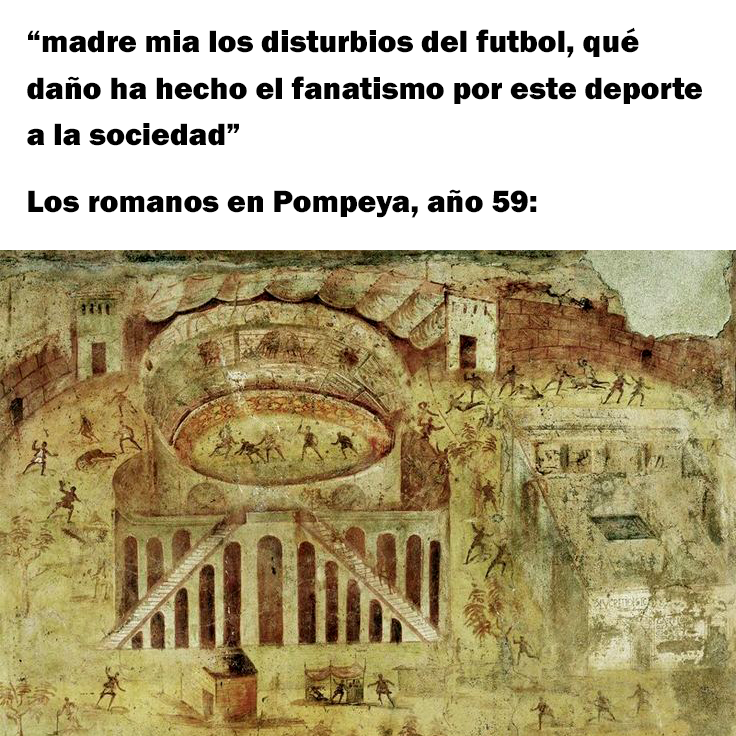
<style>
.page{position:relative;width:736px;height:736px;background:#ffffff}
.page>*{position:absolute;margin:0}
.t1{font:31.9px "FranklinGothic-Heavy";color:#010101}
</style>
<div class="page">
<p class="t1" style="left:27px;top:27px;width:675px;height:191px">“madre mia los disturbios del futbol, qué<br>daño ha hecho el fanatismo por este deporte<br>a la sociedad”<br>Los romanos en Pompeya, año 59:</p>
</div>
